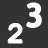
<style>
.page{position:relative;width:48px;height:48px;background:#333333}
.page>*{position:absolute;margin:0}
.t1{font:30px "AdobeFanHeitiStd-Bold";color:#ffffff}
.t2{font:30px "CourierNewPS-BoldMT";color:#ffffff}
</style>
<div class="page">
<p class="t1" style="left:27px;top:3px;width:14px;height:24px">3</p>
<p class="t2" style="left:8px;top:23px;width:14px;height:20px">2<span class="t1">3</span></p>
</div>
